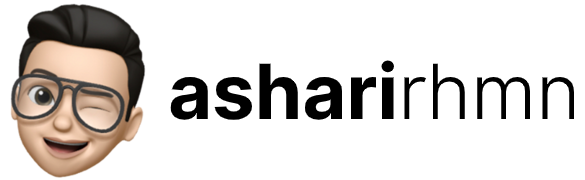
<style>
.page{position:relative;width:585px;height:180px;background:#ffffff}
.page>*{position:absolute;margin:0}
.t1{font:76px "Inter-Bold";color:#000000}
.t2{font:76px "Inter-LightBETA";color:#000000}
</style>
<div class="page">
<p class="t1" style="left:170px;top:60px;width:404px;height:60px">ashari<span class="t2">rhmn</span></p>
</div>
